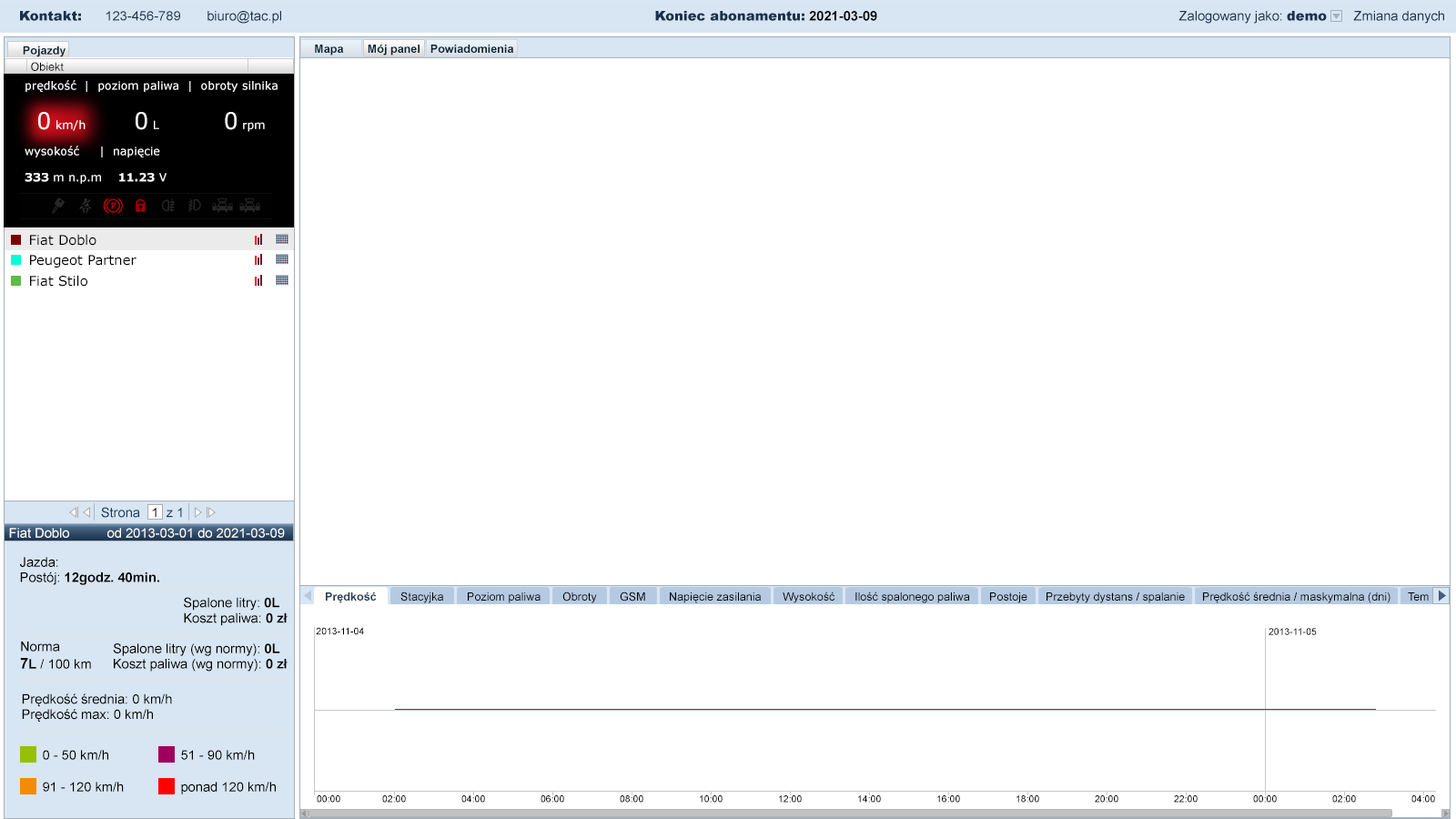
<style>
.page{position:relative;width:1456px;height:819px;background:#ffffff}
.page>*{position:absolute;margin:0}
.t1{font:13.4px "ArialMT";color:#1a324c}
.t2{font:13.4px "Arial-Black";color:#1a324c}
.t3{font:13.4px "Arial-BoldMT";color:#000000}
.t4{font:11.5px "Arial-BoldMT";color:#042338}
.t5{font:11.5px "ArialMT";color:#000000}
.t6{font:11.5px "Verdana";color:#ffffff}
.t7{font:22.9px "Verdana";color:#ffffff}
.t8{font:11.5px "Verdana-Bold";color:#ffffff}
.t9{font:13.4px "Verdana";color:#000000}
.t10{font:13.4px "ArialMT";color:#1c3b5d}
.t11{font:13.4px "ArialMT";color:#000000}
.t12{font:13.4px "ArialMT";color:#ffffff}
.t13{font:11.5px "Arial-BoldMT";color:#223b55}
.t14{font:9.6px "ArialMT";color:#000000}
.t15{font:15.3px "Arial-BoldMT";color:#000000}
</style>
<div class="page">
<p class="t1" style="left:20px;top:11px;width:1424px;height:13px"><span class="t2">Kontakt:      </span>123-456-789       biuro@tac.pl                                                                    <span class="t2">Koniec abonamentu: </span><span class="t3">2021-03-09 </span>                                   Zalogowany jako: <span class="t2">demo </span>      Zmiana danych</p>
<p class="t4" style="left:23px;top:45px;width:43px;height:12px">Pojazdy</p>
<p class="t4" style="left:315px;top:45px;width:29px;height:11px">Mapa</p>
<p class="t4" style="left:368px;top:45px;width:52px;height:11px">Mój panel</p>
<p class="t4" style="left:430px;top:45px;width:84px;height:8px">Powiadomienia</p>
<p class="t5" style="left:31px;top:62px;width:33px;height:9px">Obiekt</p>
<p class="t6" style="left:25px;top:80px;width:253px;height:104px">prędkość  |  poziom paliwa  |  obroty silnika<br><br> <span class="t7"> 0</span> km/h            <span class="t7">0</span> L                <span class="t7">0</span> rpm<br><br>wysokość     |  napięcie<br><br><span class="t8">333</span> m n.p.m    <span class="t8">11.23</span> V</p>
<p class="t9" style="left:30px;top:234px;width:66px;height:12px">Fiat Doblo</p>
<p class="t9" style="left:30px;top:255px;width:106px;height:13px">Peugeot Partner</p>
<p class="t9" style="left:30px;top:275px;width:57px;height:12px">Fiat Stilo</p>
<p class="t10" style="left:101px;top:507px;width:81px;height:11px">Strona <span class="t11">  1</span> z 1</p>
<p class="t12" style="left:9px;top:528px;width:276px;height:10px">Fiat Doblo  od 2013-03-01 do 2021-03-09</p>
<p class="t11" style="left:20px;top:557px;width:139px;height:28px">Jazda:<br>Postój: <span class="t3">12godz. 40min.</span></p>
<p class="t13" style="left:326px;top:592px;width:51px;height:11px">Prędkość</p>
<p class="t5" style="left:400px;top:591px;width:43px;height:12px">Stacyjka</p>
<p class="t5" style="left:468px;top:592px;width:73px;height:11px">Poziom paliwa</p>
<p class="t5" style="left:562px;top:591px;width:35px;height:12px">Obroty</p>
<p class="t5" style="left:620px;top:591px;width:25px;height:11px">GSM</p>
<p class="t5" style="left:670px;top:592px;width:91px;height:11px">Napięcie zasilania</p>
<p class="t5" style="left:783px;top:591px;width:52px;height:12px">Wysokość</p>
<p class="t5" style="left:855px;top:591px;width:115px;height:12px">Ilość spalonego paliwa</p>
<p class="t5" style="left:990px;top:592px;width:37px;height:11px">Postoje</p>
<p class="t5" style="left:1046px;top:592px;width:139px;height:11px">Przebyty dystans / spalanie</p>
<p class="t5" style="left:1203px;top:591px;width:187px;height:12px">Prędkość średnia / maskymalna (dni)</p>
<p class="t5" style="left:1408px;top:592px;width:21px;height:9px">Tem</p>
<p class="t11" style="left:113px;top:597px;width:175px;height:75px;text-align:right">Spalone litry: <span class="t3">0L</span>  <br>Koszt paliwa: <span class="t3">0 zł<br></span><br>Spalone litry (wg normy): <span class="t3">0L  <br></span>Koszt paliwa (wg normy): <span class="t3">0 zł</span></p>
<p class="t14" style="left:316px;top:627px;width:48px;height:8px">2013-11-04</p>
<p class="t14" style="left:1269px;top:628px;width:48px;height:7px">2013-11-05</p>
<p class="t11" style="left:20px;top:642px;width:71px;height:27px">Norma<br><span class="t15">7</span><span class="t3">L</span> / 100 km</p>
<p class="t11" style="left:22px;top:693px;width:150px;height:29px">Prędkość średnia: 0 km/h<br>Prędkość max: 0 km/h</p>
<p class="t11" style="left:43px;top:750px;width:65px;height:10px">0 - 50 km/h</p>
<p class="t11" style="left:181px;top:750px;width:74px;height:10px">51 - 90 km/h</p>
<p class="t11" style="left:43px;top:782px;width:81px;height:10px">91 - 120 km/h</p>
<p class="t11" style="left:181px;top:782px;width:95px;height:12px">ponad 120 km/h</p>
<p class="t14" style="left:317px;top:795px;width:23px;height:8px">00:00</p>
<p class="t14" style="left:382px;top:795px;width:24px;height:8px">02:00</p>
<p class="t14" style="left:461px;top:795px;width:24px;height:8px">04:00</p>
<p class="t14" style="left:541px;top:795px;width:23px;height:8px">06:00</p>
<p class="t14" style="left:620px;top:795px;width:23px;height:8px">08:00</p>
<p class="t14" style="left:700px;top:795px;width:23px;height:8px">10:00</p>
<p class="t14" style="left:779px;top:795px;width:23px;height:8px">12:00</p>
<p class="t14" style="left:858px;top:795px;width:23px;height:8px">14:00</p>
<p class="t14" style="left:937px;top:795px;width:23px;height:8px">16:00</p>
<p class="t14" style="left:1016px;top:795px;width:23px;height:8px">18:00</p>
<p class="t14" style="left:1095px;top:795px;width:23px;height:8px">20:00</p>
<p class="t14" style="left:1174px;top:795px;width:24px;height:8px">22:00</p>
<p class="t14" style="left:1253px;top:795px;width:24px;height:8px">00:00</p>
<p class="t14" style="left:1332px;top:795px;width:24px;height:8px">02:00</p>
<p class="t14" style="left:1411px;top:795px;width:24px;height:8px">04:00</p>
</div>
